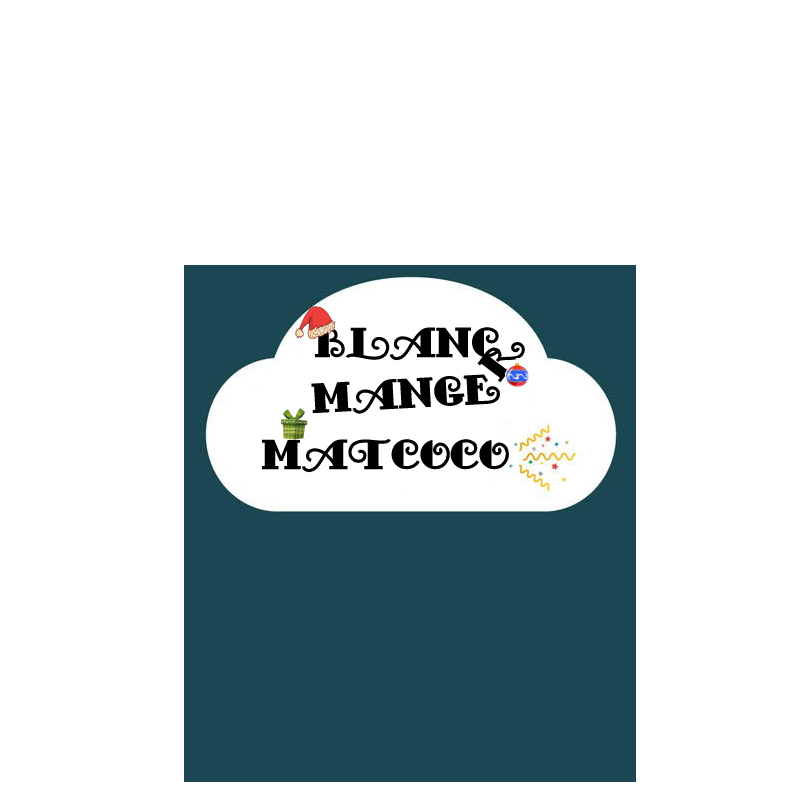
<style>
.page{position:relative;width:800px;height:800px;background:#ffffff}
.page>*{position:absolute;margin:0}
.t1{font:42px "FancyPants";color:#000000}
</style>
<div class="page">
<p class="t1" style="left:315px;top:327px;width:186px;height:34px">Blanc</p>
<p class="t1" style="left:477px;top:342px;width:48px;height:41px;rotate:-53deg">r</p>
<p class="t1" style="left:311px;top:374px;width:189px;height:40px;rotate:-3deg">Mange</p>
<p class="t1" style="left:262px;top:438px;width:247px;height:35px">Matcoco</p>
</div>
